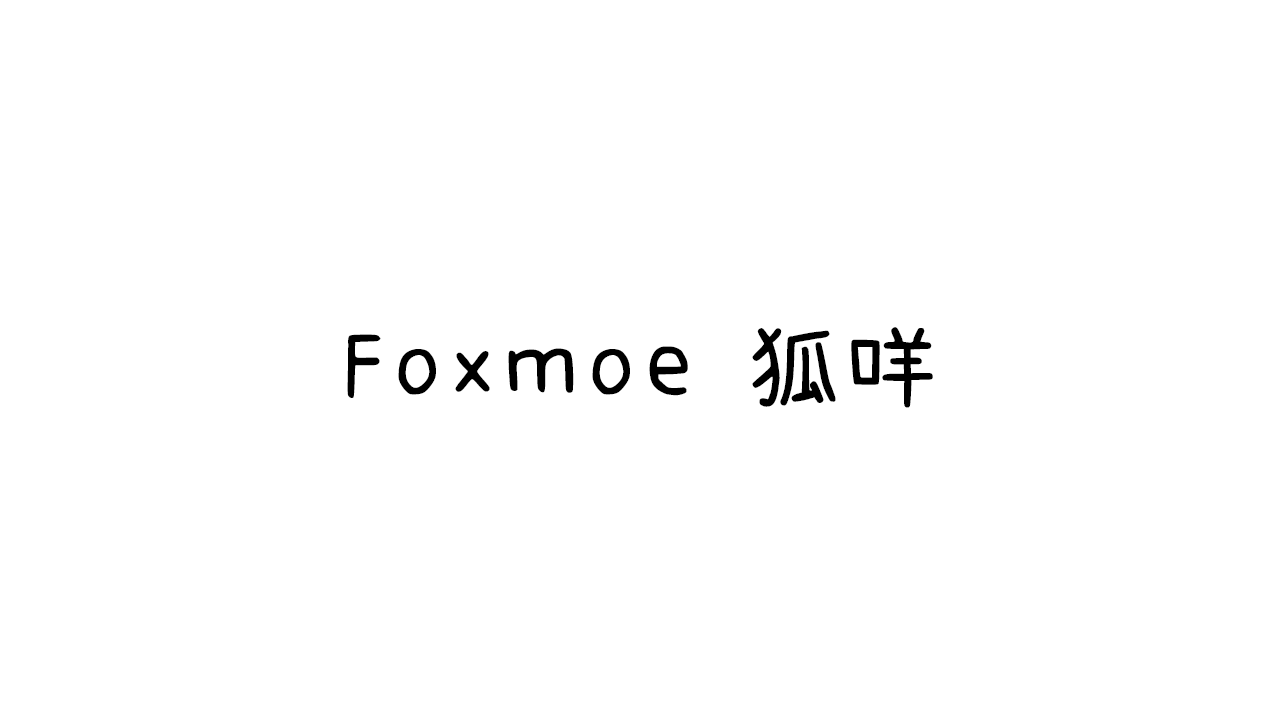
<style>
.page{position:relative;width:1280px;height:720px;background:#ffffff}
.page>*{position:absolute;margin:0}
.t1{font:98px "cjkFonts-Regular";color:#000000}
</style>
<div class="page">
<p class="t1" style="left:347px;top:327px;width:586px;height:81px">Foxmoe 狐咩</p>
</div>
